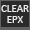
<style>
.page{position:relative;width:30px;height:30px;background:#2b2b2b}
.page>*{position:absolute;margin:0}
.t1{font:11px "Calibri";color:#eaeaea}
</style>
<div class="page">
<p class="t1" style="left:1px;top:5px;width:28px;height:18px">CLEAR EPX</p>
</div>
